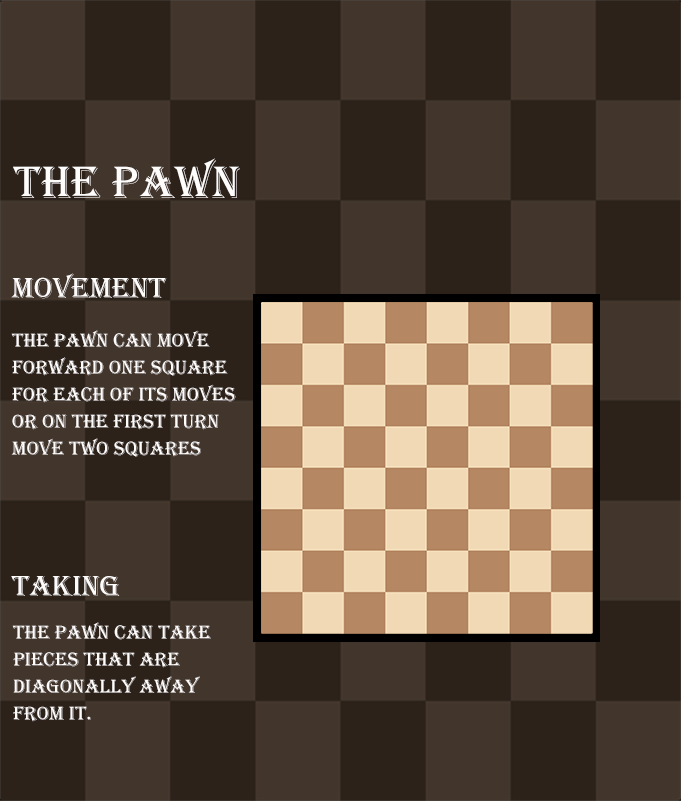
<style>
.page{position:relative;width:681px;height:801px;background:#41352c}
.page>*{position:absolute;margin:0}
.t1{font:47px "Algerian";color:#fffcfc}
.t2{font:30px "Algerian";color:#fffcfc}
.t3{font:20px/9px "Algerian";color:#fffcfc}
</style>
<div class="page">
<p class="t1" style="left:13px;top:158px;width:227px;height:40px">The Pawn</p>
<p class="t2" style="left:11px;top:273px;width:156px;height:26px">Movement</p>
<p class="t3" style="left:11px;top:330px;width:225px;height:127px">The pawn can move <br><br><br>forward one square<br><br><br>for each of its moves<br><br><br>or on the first turn<br><br><br>move two squares</p>
<p class="t2" style="left:11px;top:576px;width:109px;height:20px">Taking</p>
<p class="t3" style="left:12px;top:622px;width:199px;height:100px">The pawn can take<br><br><br>pieces that are <br><br><br>diagonally away<br><br><br>from it.</p>
</div>
